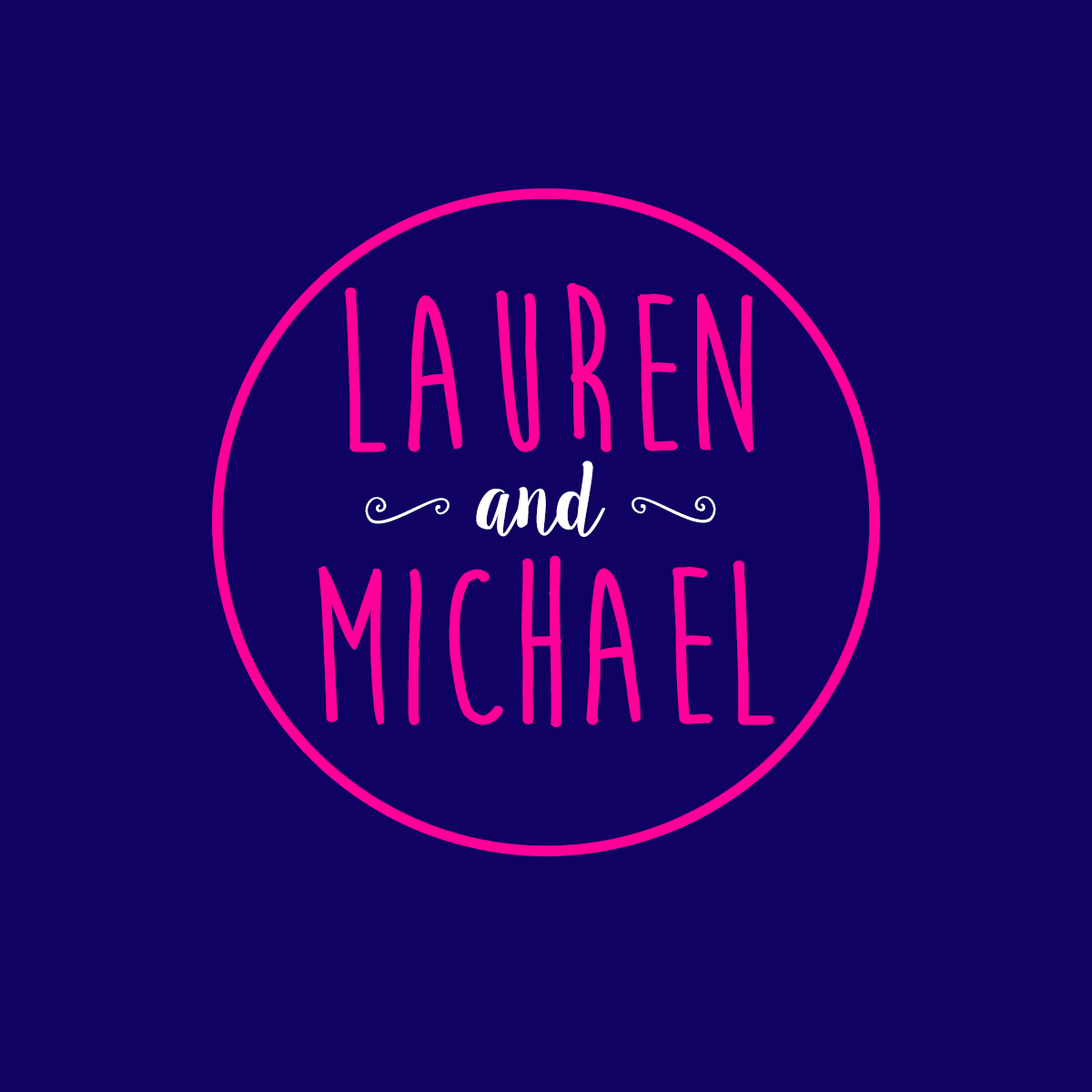
<style>
.page{position:relative;width:1092px;height:1092px;background:#0f0262}
.page>*{position:absolute;margin:0}
.t1{font:227.5px "MoonFlowerBold";color:#ff0099}
.t2{font:91px "Sweet_Pea";color:#ffffff}
.t3{font:37.9px "Sweet_Pea";color:#ffffff}
</style>
<div class="page">
<p class="t1" style="left:318px;top:283px;width:456px;height:444px;text-align:center">LAUREN<br>MICHAEL</p>
<p class="t2" style="left:476px;top:460px;width:130px;height:77px">and</p>
<p class="t3" style="left:365px;top:497px;width:85px;height:27px;rotate:180deg">[</p>
<p class="t3" style="left:632px;top:496px;width:84px;height:27px">[</p>
</div>
